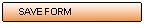
<style>
.page{position:relative;width:144px;height:24px}
.page>*{position:absolute;margin:0}
.t1{font:10.4px "Arial-BoldMT";letter-spacing:-0.075em;color:#060808;text-transform:uppercase}
</style>
<div class="page">
<p class="t1" style="left:19px;top:8px;width:52px;height:7px">save form</p>
</div>
